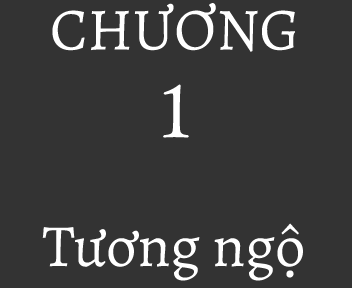
<style>
.page{position:relative;width:352px;height:288px;background:#333333}
.page>*{position:absolute;margin:0}
.t1{font:60px "Alegreya-Regular";color:#ffffff}
</style>
<div class="page">
<p class="t1" style="left:52px;top:3px;width:243px;height:49px">CHƯƠNG</p>
<p class="t1" style="left:42px;top:223px;width:261px;height:58px">Tương ngộ</p>
</div>
